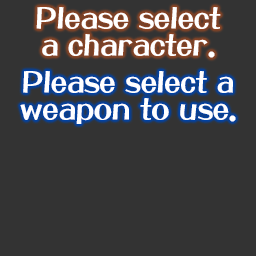
<style>
.page{position:relative;width:256px;height:256px;background:#333333}
.page>*{position:absolute;margin:0}
.t1{font:29px/27px "DFPOPCorn-W12-WINP-RKSJ-H";color:#ffffff}
</style>
<div class="page">
<p class="t1" style="left:36px;top:7px;width:185px;height:51px;text-align:center">Please select<br>a character.</p>
<p class="t1" style="left:20px;top:71px;width:216px;height:53px;text-align:center">Please select a<br>weapon to use.</p>
</div>
